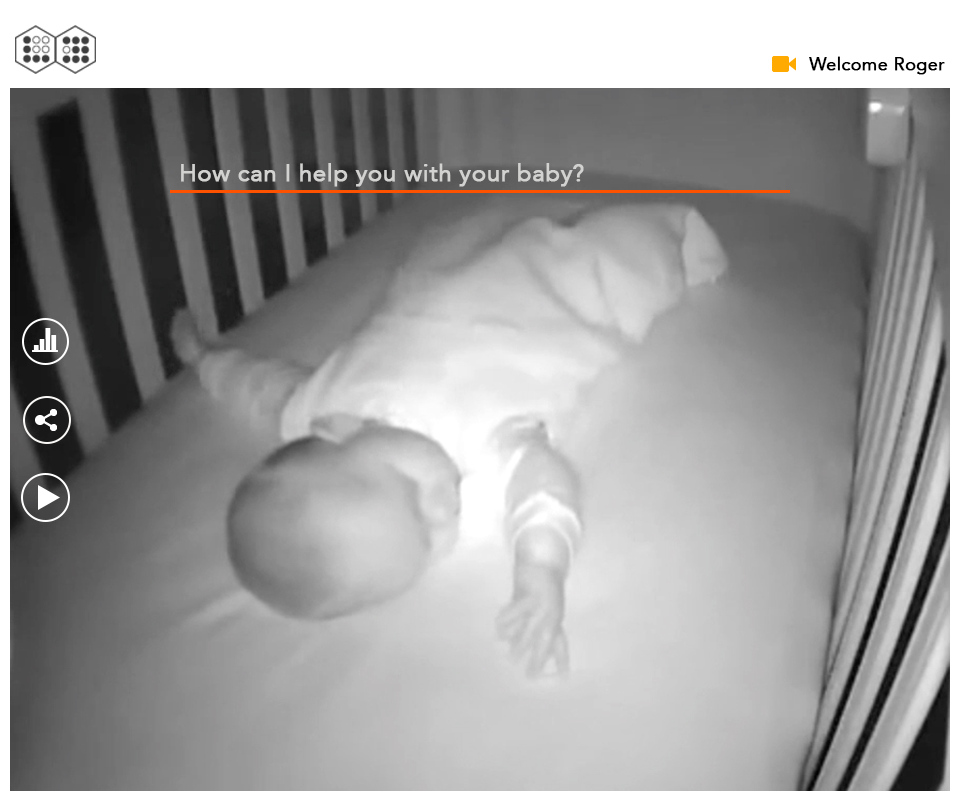
<style>
.page{position:relative;width:960px;height:800px}
.page>*{position:absolute;margin:0}
.t1{font:18px "Avenir-Roman";color:#000000;font-weight:bold}
.t2{font:24px "Avenir-Roman";color:#d2d2d1;font-weight:bold}
</style>
<div class="page">
<p class="t1" style="left:809px;top:56px;width:136px;height:19px">Welcome Roger</p>
<p class="t2" style="left:181px;top:163px;width:403px;height:24px">How can I help you with your baby?</p>
</div>
